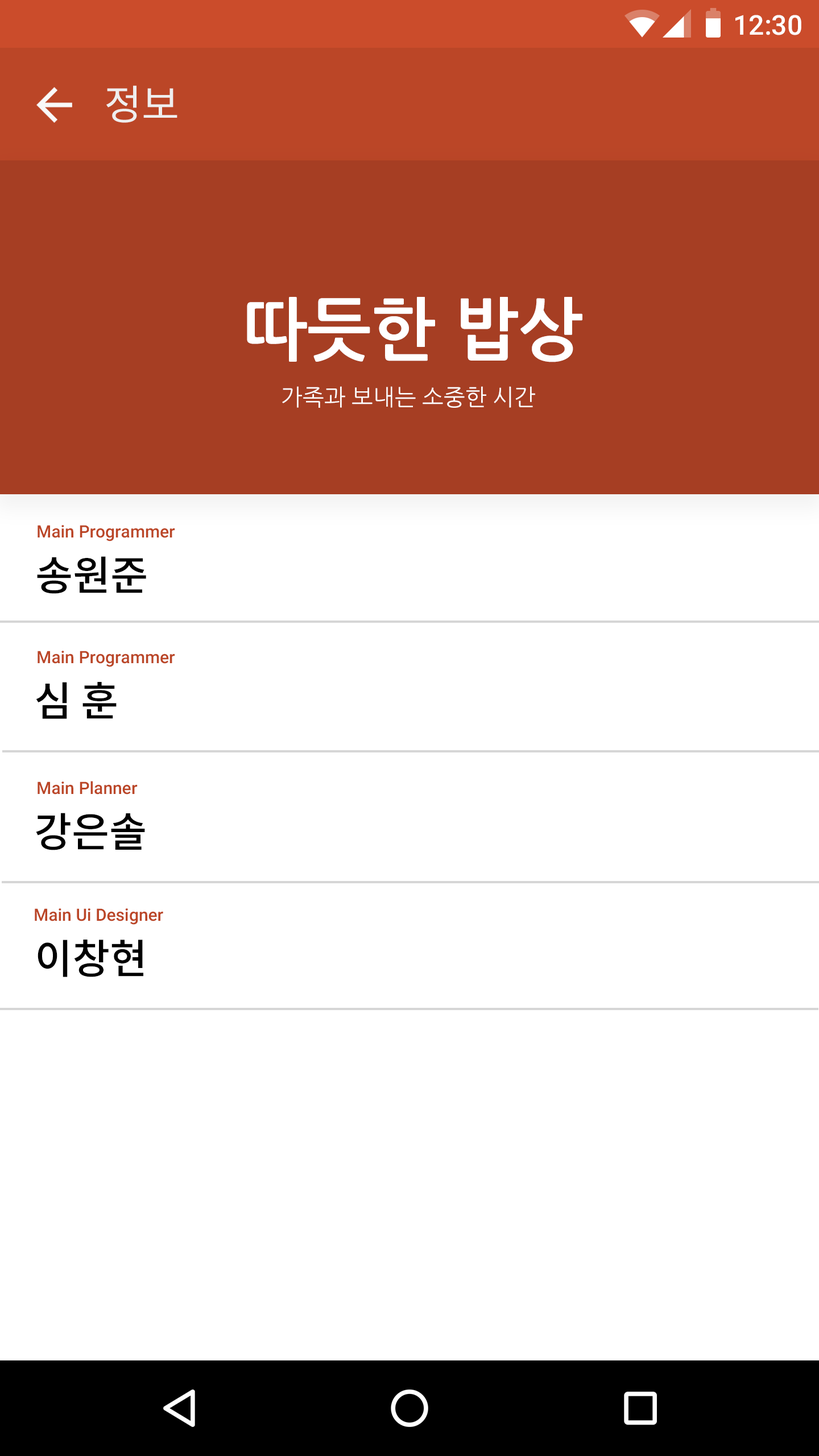
<style>
.page{position:relative;width:819px;height:1456px;background:#ffffff}
.page>*{position:absolute;margin:0}
.t1{font:27.3px "Roboto-Medium";color:#ffffff}
.t2{font:40.9px "NotoSansCJKkr-Regular";color:#efeeee}
.t3{font:68.2px "NanumGothicBold";color:#ffffff}
.t4{font:22.7px "NanumGothic";color:#ffffff}
.t5{font:17.1px "Roboto-Medium";color:#bb4627}
.t6{font:40.9px "NotoSansCJKkr-Medium";color:#000000}
.t7{font:41px "NotoSansCJKkr-Medium";color:#000000}
</style>
<div class="page">
<p class="t1" style="left:735px;top:15px;width:66px;height:20px">12:30</p>
<p class="t2" style="left:106px;top:85px;width:71px;height:38px">정보</p>
<p class="t3" style="left:247px;top:297px;width:335px;height:65px">따듯한 밥상</p>
<p class="t4" style="left:282px;top:386px;width:253px;height:22px">가족과 보내는 소중한 시간</p>
<p class="t5" style="left:38px;top:525px;width:137px;height:16px">Main Programmer</p>
<p class="t6" style="left:37px;top:556px;width:109px;height:38px">송원준</p>
<p class="t5" style="left:38px;top:651px;width:137px;height:16px">Main Programmer</p>
<p class="t6" style="left:36px;top:682px;width:81px;height:37px">심 훈</p>
<p class="t5" style="left:38px;top:781px;width:100px;height:14px">Main Planner</p>
<p class="t7" style="left:36px;top:813px;width:109px;height:37px">강은솔</p>
<p class="t5" style="left:35px;top:908px;width:128px;height:17px">Main Ui Designer</p>
<p class="t7" style="left:38px;top:940px;width:105px;height:37px">이창현</p>
</div>
